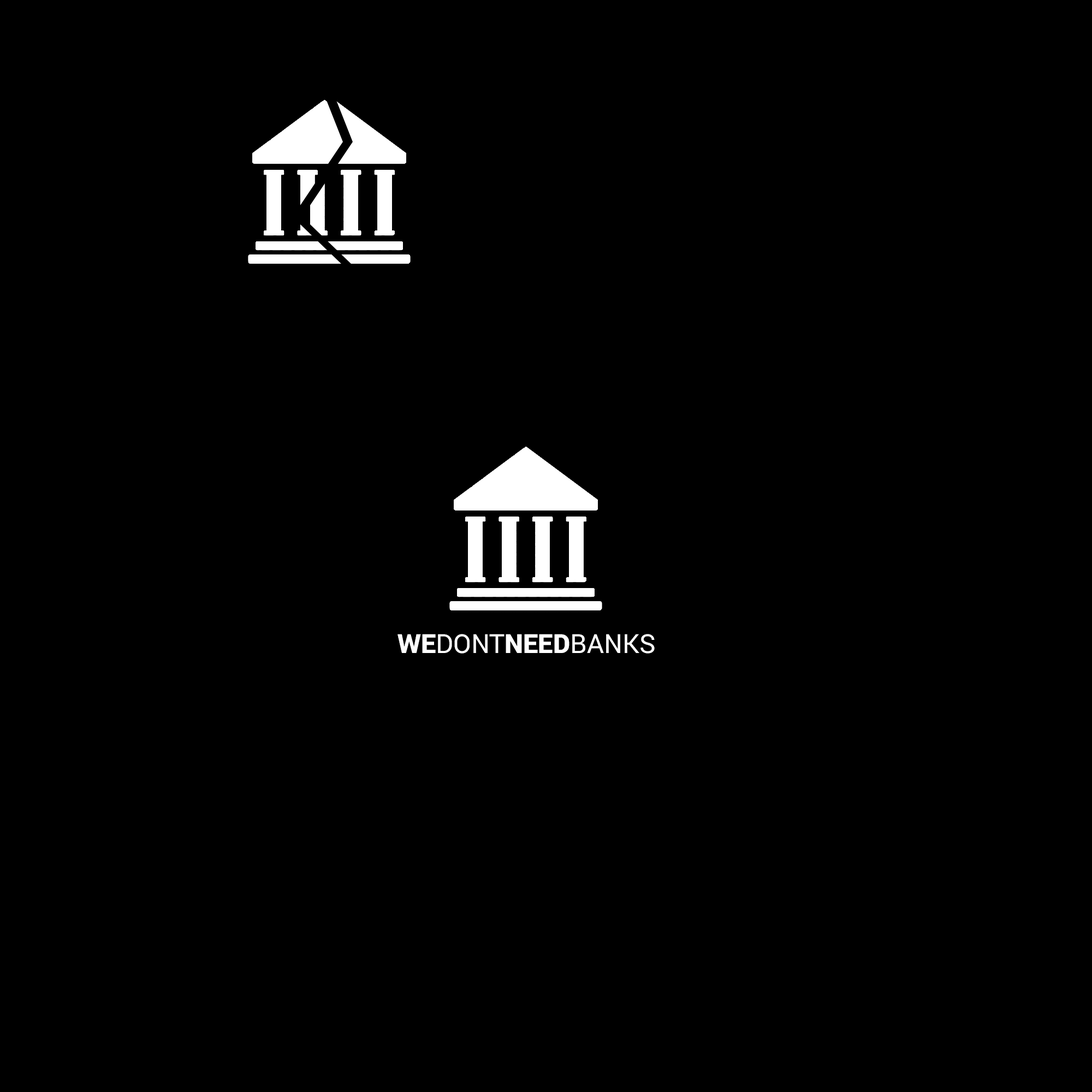
<style>
.page{position:relative;width:1092px;height:1092px;background:#000000}
.page>*{position:absolute;margin:0}
.t1{font:26.2px "Roboto-Regular";color:#ffffff}
.t2{font:26.2px "Roboto-Black";color:#ffffff}
</style>
<div class="page">
<p class="t1" style="left:397px;top:634px;width:258px;height:20px"><span class="t2">WE</span>DONT<span class="t2">NEED</span>BANKS</p>
</div>
